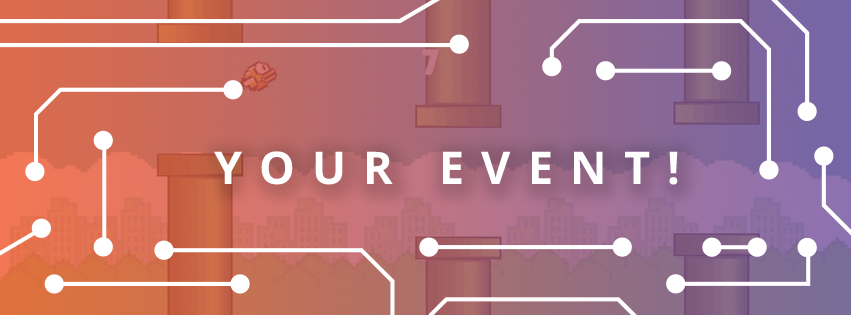
<style>
.page{position:relative;width:851px;height:315px}
.page>*{position:absolute;margin:0}
.t1{font:45px "OpenSans-Bold";letter-spacing:0.38em;color:#ffffff}
</style>
<div class="page">
<p class="t1" style="left:214px;top:151px;width:464px;height:34px">YOUR EVENT!</p>
</div>
